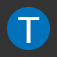
<style>
.page{position:relative;width:57px;height:57px;background:#333333}
.page>*{position:absolute;margin:0}
.t1{font:37px "TrebuchetMS";color:#ffffff}
</style>
<div class="page">
<p class="t1" style="left:18px;top:17px;width:22px;height:26px">T</p>
</div>
